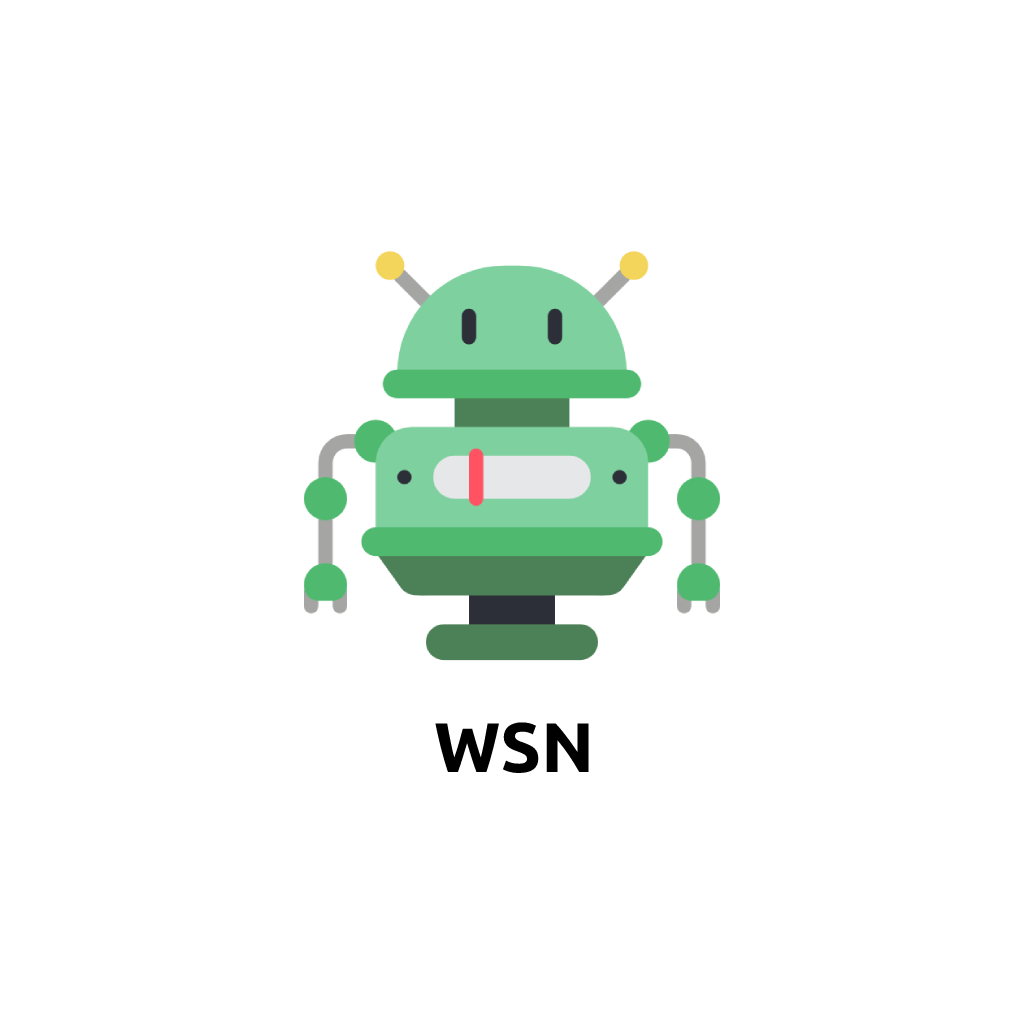
<style>
.page{position:relative;width:1024px;height:1024px;background:#ffffff}
.page>*{position:absolute;margin:0}
.t1{font:70px "Ubuntu-Bold";color:#000000}
</style>
<div class="page">
<p class="t1" style="left:435px;top:722px;width:154px;height:51px">WSN</p>
</div>
